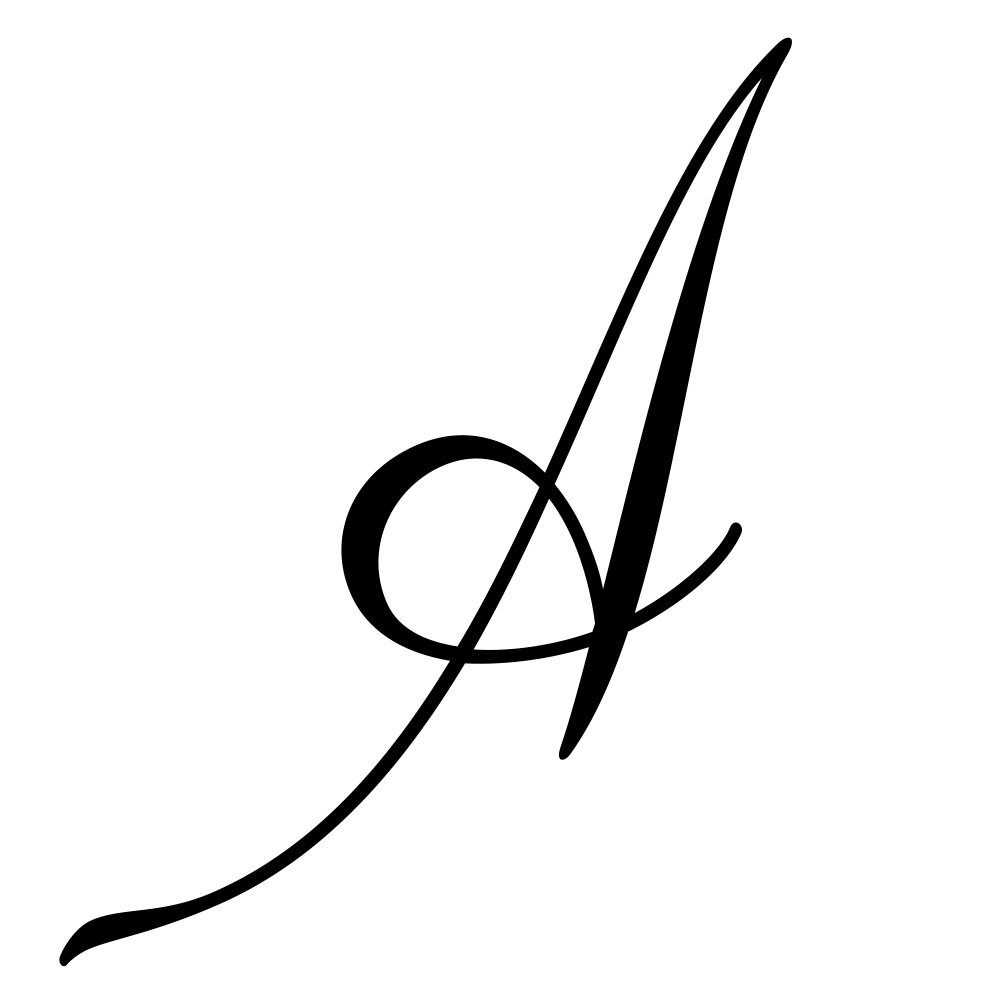
<style>
.page{position:relative;width:1000px;height:1000px;background:#ffffff}
.page>*{position:absolute;margin:0}
.t1{font:839.6px "OPTIOldFashioned-Script";letter-spacing:0.02em;color:#000000}
</style>
<div class="page">
<p class="t1" style="left:59px;top:37px;width:733px;height:930px;rotate:-24deg">A</p>
</div>
